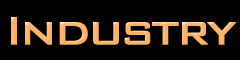
<style>
.page{position:relative;width:240px;height:60px;background:#000000}
.page>*{position:absolute;margin:0}
.t1{font:52.2px "BankGothicBT-Light";letter-spacing:-0.075em;color:#ffb469;font-weight:bold}
</style>
<div class="page">
<p class="t1" style="left:11px;top:17px;width:225px;height:28px">Industry</p>
</div>
